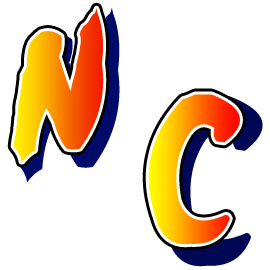
<style>
.page{position:relative;width:270px;height:270px;background:#ffffff}
.page>*{position:absolute;margin:0}
.t1{font:187px "Ninja-Naruto";scale:0.91 1}
</style>
<div class="page">
<p class="t1" style="left:18px;top:8px;width:102px;height:174px">n</p>
<p class="t1" style="left:159px;top:96px;width:104px;height:171px">C</p>
</div>
